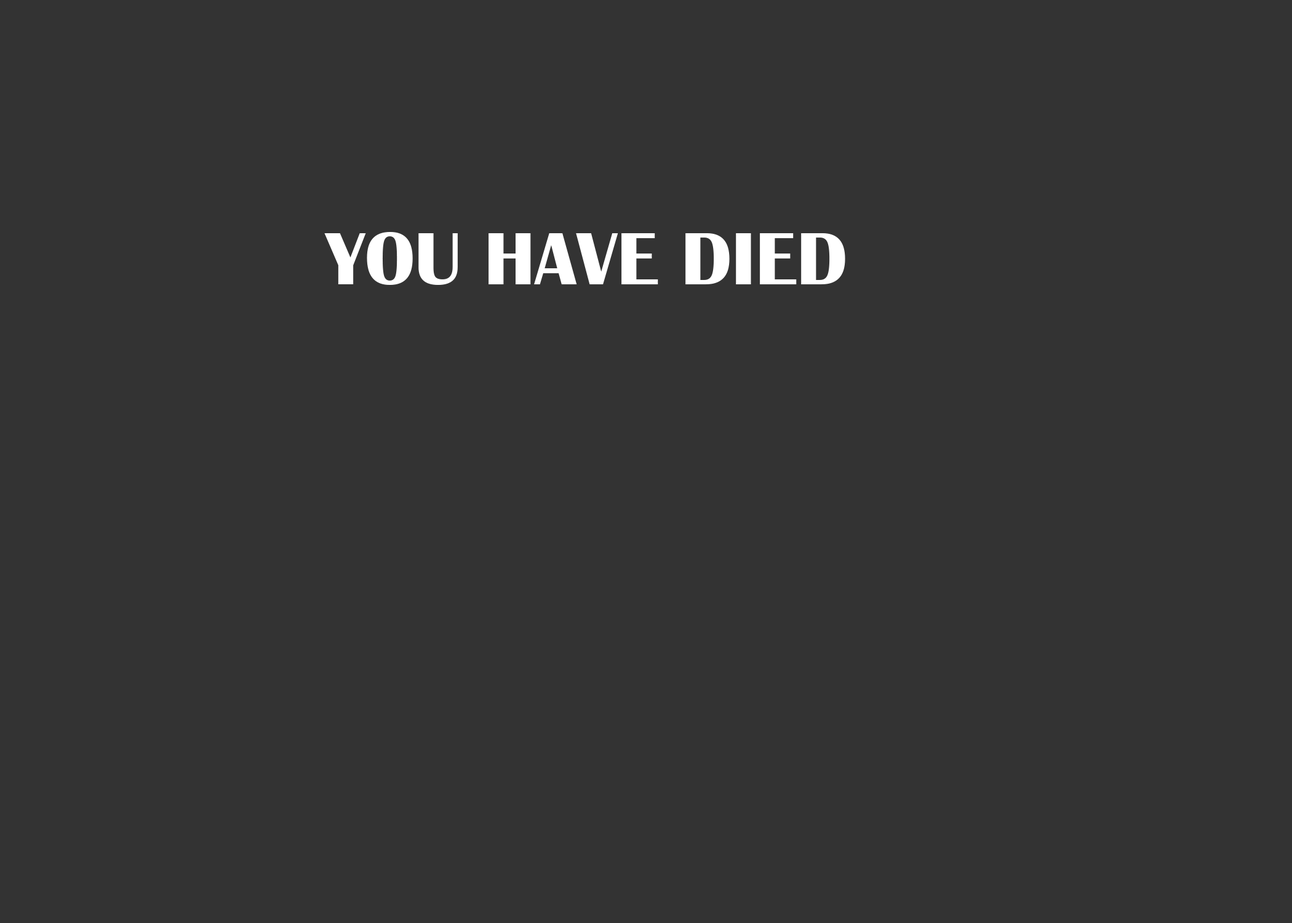
<style>
.page{position:relative;width:1292px;height:923px;background:#333333}
.page>*{position:absolute;margin:0}
.t1{font:76.9px "BritannicBold";color:#ffffff}
</style>
<div class="page">
<p class="t1" style="left:324px;top:232px;width:521px;height:53px">YOU HAVE DIED</p>
</div>
